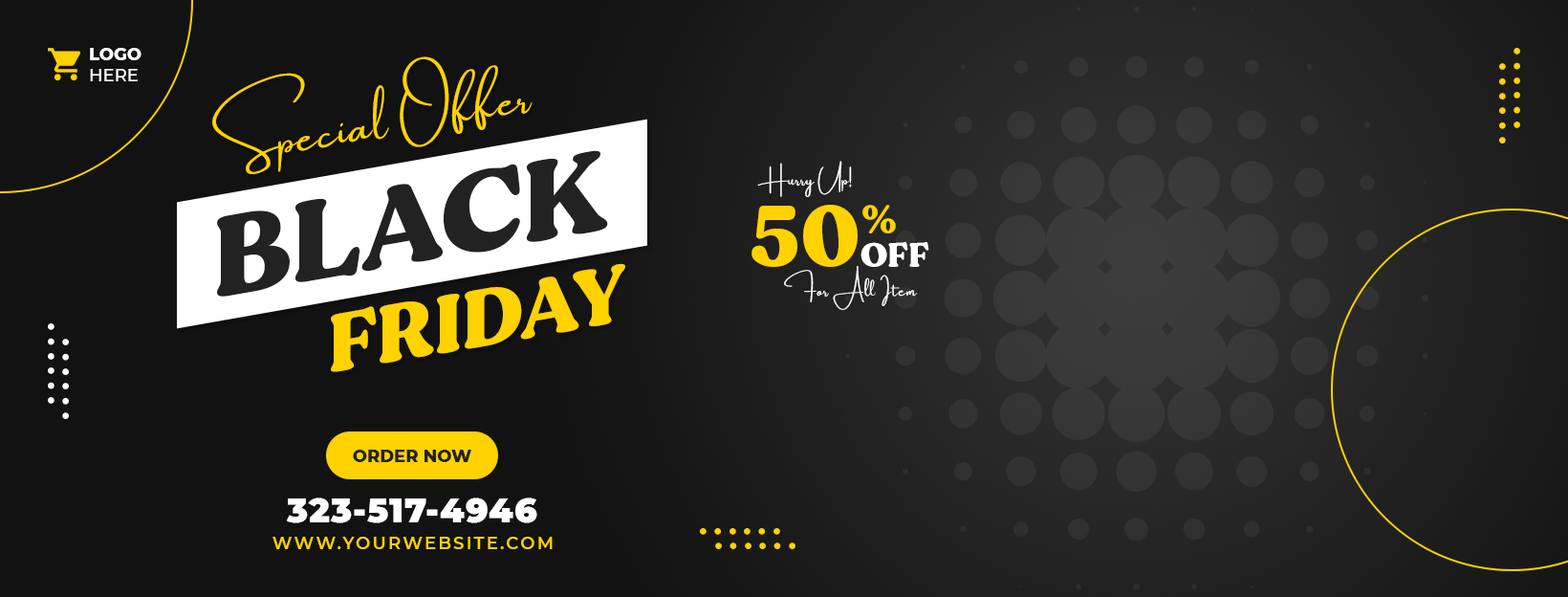
<style>
.page{position:relative;width:1568px;height:597px;background:#121212}
.page>*{position:absolute;margin:0}
.t1{font:17.2px "Montserrat-ExtraBold";color:#ffffff;text-transform:uppercase}
.t2{font:17.2px "Montserrat-Medium";color:#ffffff;text-transform:uppercase}
.t3{font:42.1px "Amsterdam";letter-spacing:0.025em;color:#ffd200}
.t4{font:114.7px "MADEGentle";color:#222222;text-transform:uppercase}
.t5{font:15.3px "Amsterdam";letter-spacing:0.025em;color:#ffffff}
.t6{font:86px "MADEGentle";color:#ffd200;text-transform:uppercase}
.t7{font:38.2px "MADEGentle";color:#ffd200;text-transform:uppercase}
.t8{font:34.4px "MADEGentle";color:#ffffff;text-transform:uppercase}
.t9{font:82.2px "MADEGentle";color:#ffd200;text-transform:uppercase}
.t10{font:15.3px "Amsterdam";letter-spacing:0.05em;color:#ffffff}
.t11{font:17.2px "Montserrat-ExtraBold";color:#222222;text-transform:uppercase}
.t12{font:34.4px "Montserrat-Black";letter-spacing:0.025em;color:#ffffff}
.t13{font:17.2px "Montserrat-SemiBold";letter-spacing:0.12em;color:#ffd200;text-transform:uppercase}
</style>
<div class="page">
<p class="t1" style="left:90px;top:48px;width:52px;height:33px">Logo<br><span class="t2">Here</span></p>
<p class="t3" style="left:212px;top:56px;width:321px;height:118px;rotate:-10deg">Special Offer</p>
<p class="t4" style="left:217px;top:150px;width:391px;height:146px;rotate:-10deg">Black</p>
<p class="t5" style="left:757px;top:161px;width:95px;height:36px;text-align:center">Hurry Up!</p>
<p class="t6" style="left:751px;top:205px;width:107px;height:62px">50</p>
<p class="t7" style="left:862px;top:205px;width:34px;height:28px">%</p>
<p class="t8" style="left:860px;top:242px;width:69px;height:25px">Off</p>
<p class="t9" style="left:331px;top:263px;width:294px;height:109px;rotate:-10deg">Friday</p>
<p class="t10" style="left:784px;top:266px;width:134px;height:44px;text-align:center">For All Item</p>
<p class="t11" style="left:353px;top:449px;width:118px;height:13px">Order Now</p>
<p class="t12" style="left:287px;top:497px;width:250px;height:26px">323-517-4946</p>
<p class="t13" style="left:272px;top:536px;width:281px;height:13px">www.yourwebsite.com</p>
</div>
